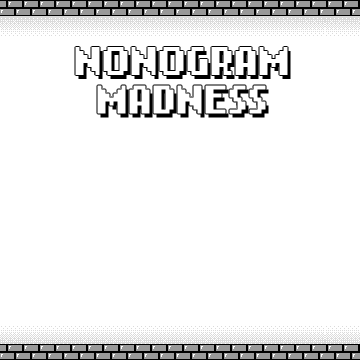
<style>
.page{position:relative;width:360px;height:360px;background:#ffffff}
.page>*{position:absolute;margin:0}
.t1{font:32px "NokiaCellphoneFC-Small";color:#ffffff}
</style>
<div class="page">
<p class="t1" style="left:75px;top:47px;width:213px;height:67px;text-align:center">NONOGRAM<br>MADNESS</p>
</div>
